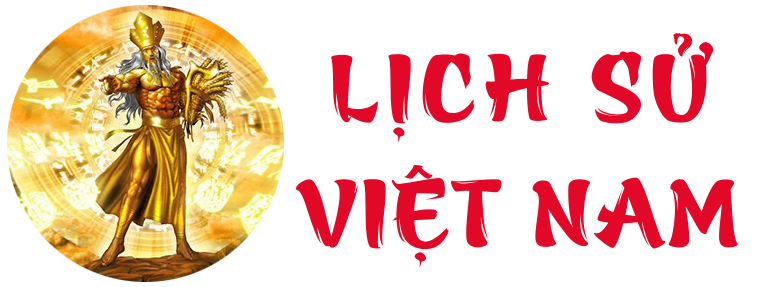
<style>
.page{position:relative;width:778px;height:287px;background:#ffffff}
.page>*{position:absolute;margin:0}
.t1{font:108.3px/125px "UTM-Azuki";color:#e20928}
.t2{font:108.3px/125px "UTM-Azuki";letter-spacing:0.05em;color:#e20928}
</style>
<div class="page">
<p class="t1" style="left:296px;top:33px;width:442px;height:235px;text-align:center"><span class="t2">LỊCH SỬ<br></span>VIỆT NAM</p>
</div>
